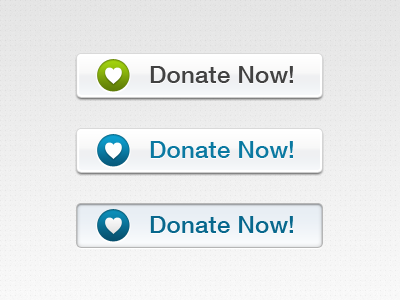
<style>
.page{position:relative;width:400px;height:300px}
.page>*{position:absolute;margin:0}
.t1{font:24px "HelveticaNeue-Medium";letter-spacing:0.01em;color:#424242}
.t2{font:24px "HelveticaNeue-Medium";letter-spacing:0.01em;color:#0a79a1}
.t3{font:24px "HelveticaNeue-Medium";letter-spacing:0.01em;color:#08688d}
</style>
<div class="page">
<p class="t1" style="left:150px;top:66px;width:143px;height:17px">Donate Now!</p>
<p class="t2" style="left:150px;top:141px;width:143px;height:17px">Donate Now!</p>
<p class="t3" style="left:150px;top:216px;width:143px;height:17px">Donate Now!</p>
</div>
